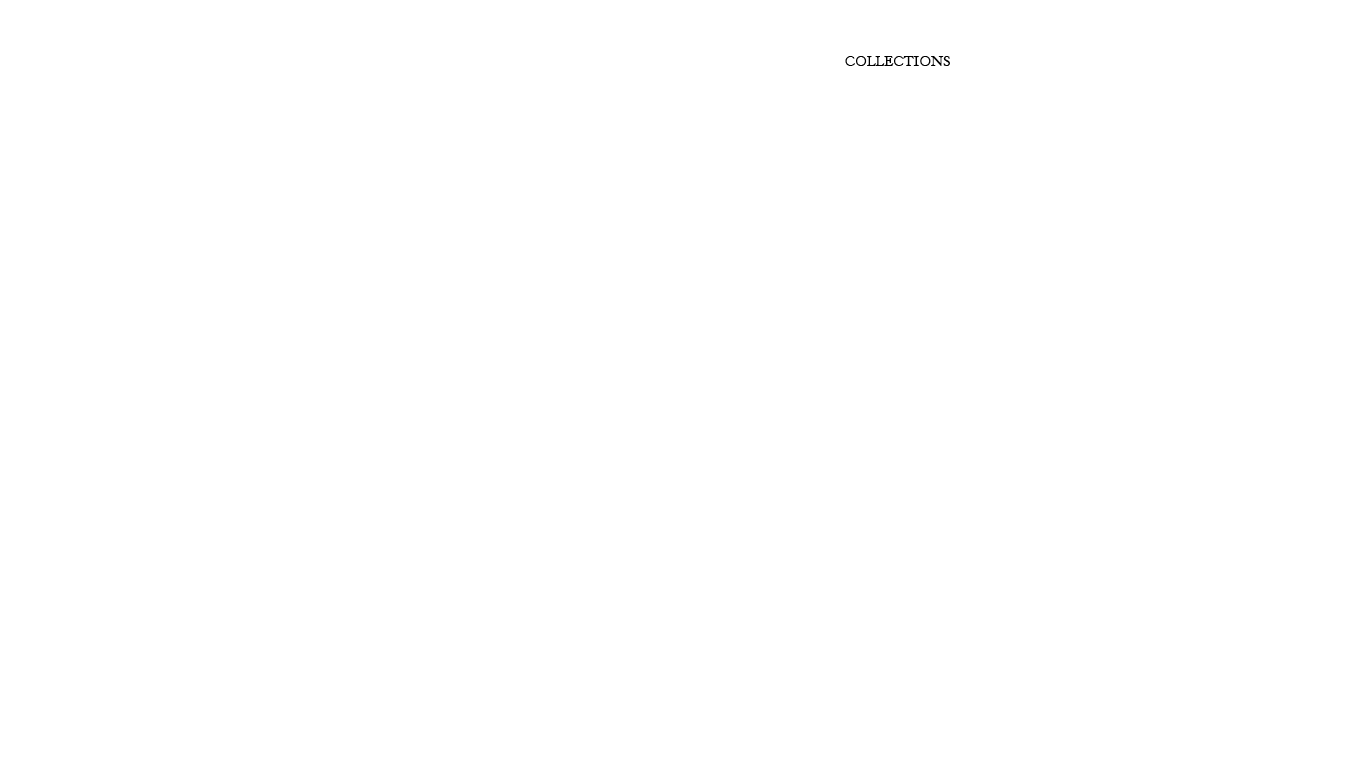
<style>
.page{position:relative;width:1366px;height:768px;background:#ffffff}
.page>*{position:absolute;margin:0}
.t1{font:14px "HoeflerText-Regular";color:#000000}
</style>
<div class="page">
<p class="t1" style="left:845px;top:56px;width:105px;height:10px">COLLECTIONS</p>
</div>
